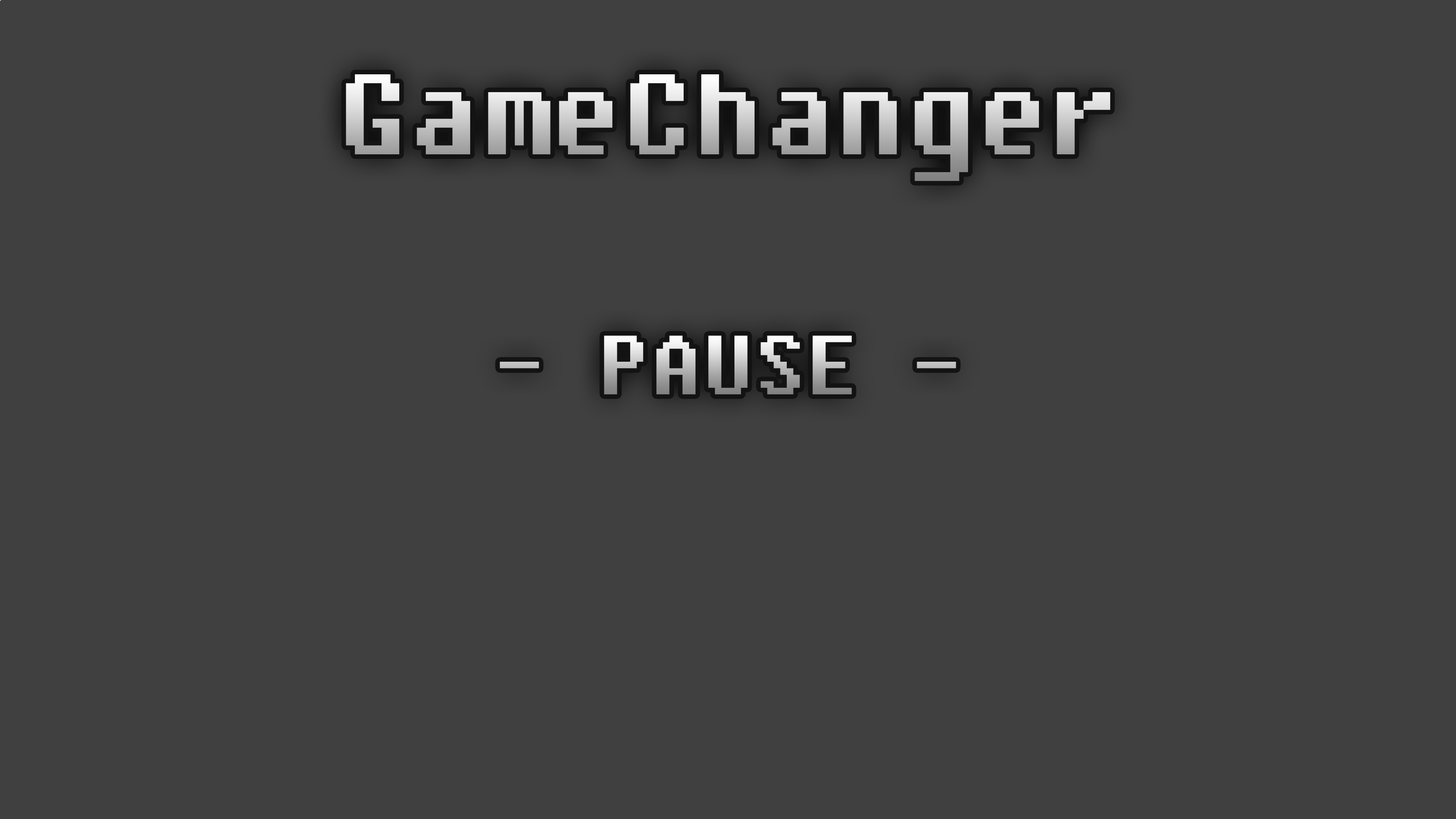
<style>
.page{position:relative;width:1456px;height:819px;background:#404040}
.page>*{position:absolute;margin:0}
.t1{font:113.7px "Fixedsys"}
.t2{font:83.4px "Fixedsys"}
</style>
<div class="page">
<p class="t1" style="left:346px;top:74px;width:764px;height:107px">GameChanger</p>
<p class="t2" style="left:500px;top:336px;width:456px;height:58px">- PAUSE -</p>
</div>
